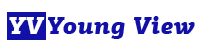
<style>
.page{position:relative;width:200px;height:50px;background:#ffffff}
.page>*{position:absolute;margin:0}
.t1{font:24px "PFAgoraSlabPro-BlackItalic";color:#ffffff}
.t2{font:24px "PFAgoraSlabPro-BlackItalic";color:#1111a8}
</style>
<div class="page">
<p class="t1" style="left:9px;top:17px;width:36px;height:17px">YV</p>
<p class="t2" style="left:47px;top:16px;width:148px;height:23px">Young View</p>
</div>
